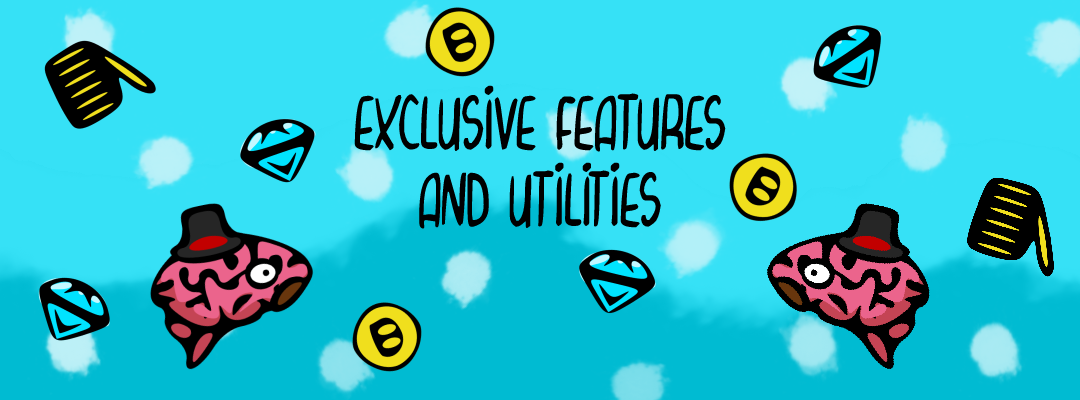
<style>
.page{position:relative;width:1080px;height:400px;background:#36e1f6}
.page>*{position:absolute;margin:0}
.t1{font:64px "CurvyThins";color:#000000}
</style>
<div class="page">
<p class="t1" style="left:354px;top:85px;width:372px;height:145px;text-align:center">Exclusive features<br>and utilities</p>
</div>
